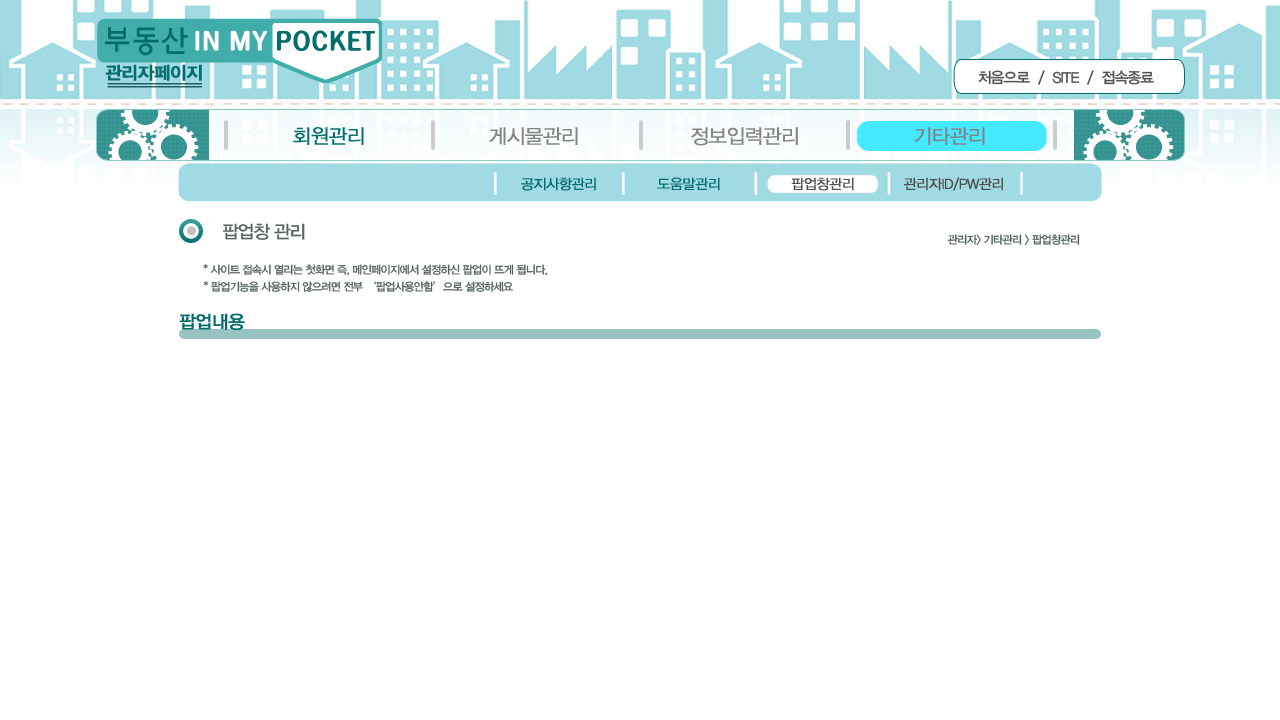
<style>
.page{position:relative;width:1280px;height:720px;background:#ffffff}
.page>*{position:absolute;margin:0}
.t1{font:17.8px "YDIYGO340";letter-spacing:-0.04em;color:#036d6d;font-weight:bold}
.t2{font:15px "YDIYGO330";letter-spacing:-0.06em;color:#535353}
.t3{font:20px "YDIYGO320";letter-spacing:-0.04em;color:#036d6d;font-weight:bold}
.t4{font:20px "YDIYGO320";letter-spacing:-0.04em;color:#838383;font-weight:bold}
.t5{font:14px "YDIYGO320";letter-spacing:-0.04em;color:#036d6d;font-weight:bold}
.t6{font:14px "YDIYGO320";letter-spacing:-0.04em;color:#4f4f4f;font-weight:bold}
.t7{font:18px "YDIYGO330";letter-spacing:-0.06em;color:#576262}
.t8{font:11px "YDIYGO330";letter-spacing:-0.06em;color:#576262}
.t9{font:18px "YDIYGO330";letter-spacing:-0.04em;color:#036d6d;font-weight:bold}
</style>
<div class="page">
<p class="t1" style="left:105px;top:64px;width:97px;height:17px">관리자페이지</p>
<p class="t2" style="left:978px;top:70px;width:176px;height:15px">처음으로  /  SITE  /  접속종료</p>
<p class="t3" style="left:293px;top:127px;width:71px;height:18px">회원관리</p>
<p class="t4" style="left:489px;top:127px;width:89px;height:18px">게시물관리</p>
<p class="t4" style="left:691px;top:127px;width:107px;height:19px">정보입력관리</p>
<p class="t4" style="left:914px;top:127px;width:71px;height:18px">기타관리</p>
<p class="t5" style="left:521px;top:177px;width:75px;height:14px">공지사항관리</p>
<p class="t5" style="left:657px;top:177px;width:63px;height:14px">도움말관리</p>
<p class="t6" style="left:791px;top:177px;width:63px;height:14px">팝업창관리</p>
<p class="t6" style="left:904px;top:177px;width:99px;height:14px">관리자ID/PW관리</p>
<p class="t7" style="left:223px;top:223px;width:82px;height:17px">팝업창 관리</p>
<p class="t8" style="left:947px;top:234px;width:133px;height:12px">관리자&gt; 기타관리 &gt; 팝업창관리</p>
<p class="t8" style="left:203px;top:264px;width:345px;height:12px">* 사이트 접속시 열리는 첫화면 즉, 메인페이지에서 설정하신 팝업이 뜨게 됩니다.</p>
<p class="t8" style="left:203px;top:281px;width:311px;height:11px">* 팝업기능을 사용하지 않으려면 전부 ‘팝업사용안함’으로 설정하세요</p>
<p class="t9" style="left:179px;top:313px;width:66px;height:17px">팝업내용</p>
</div>
